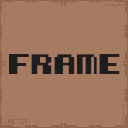
<style>
.page{position:relative;width:128px;height:128px;background:#a77a62}
.page>*{position:absolute;margin:0}
.t1{font:29px "KemcoPixelBold";color:#1e1e1e}
</style>
<div class="page">
<p class="t1" style="left:9px;top:54px;width:111px;height:20px">Frame</p>
</div>
